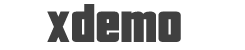
<style>
.page{position:relative;width:245px;height:50px;background:#ffffff}
.page>*{position:absolute;margin:0}
.t1{font:60px "Pricedown";color:#404040}
</style>
<div class="page">
<p class="t1" style="left:47px;top:4px;width:134px;height:38px">xdemo</p>
</div>
